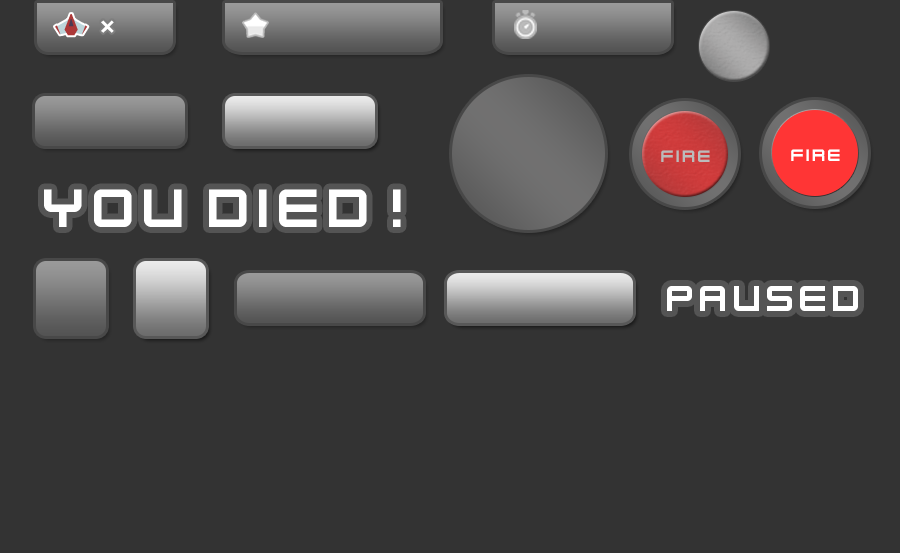
<style>
.page{position:relative;width:900px;height:553px;background:#333333}
.page>*{position:absolute;margin:0}
.t1{font:18.4px "KenVector-Future";color:#bbbbbb}
.t2{font:18.4px "KenVector-Future";color:#ffffff}
.t3{font:60px "KenVector-Future";color:#ffffff}
.t4{font:40px "KenVector-Future";color:#ffffff}
</style>
<div class="page">
<p class="t1" style="left:661px;top:150px;width:49px;height:12px">fire</p>
<p class="t2" style="left:791px;top:149px;width:49px;height:12px">fire</p>
<p class="t3" style="left:44px;top:189px;width:357px;height:38px">yOU dIED!</p>
<p class="t4" style="left:667px;top:286px;width:191px;height:25px">paused</p>
</div>
